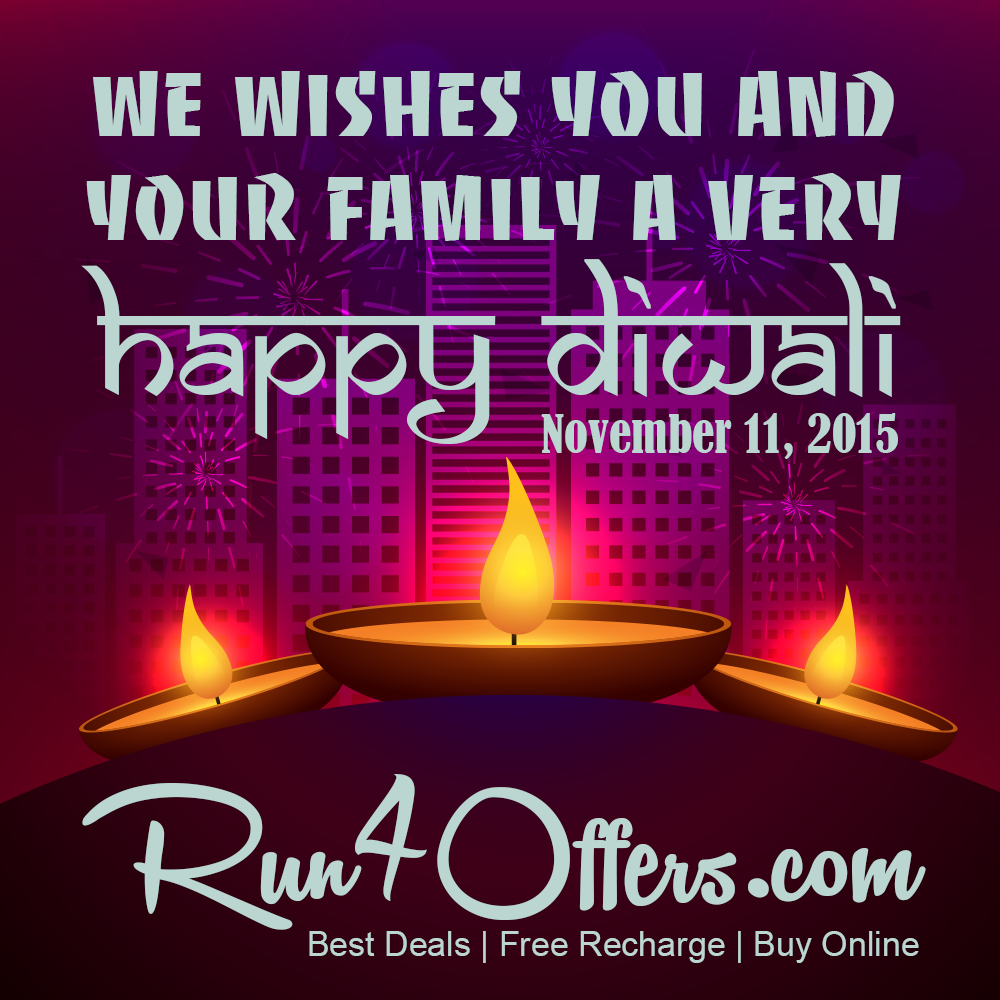
<style>
.page{position:relative;width:1000px;height:1000px}
.page>*{position:absolute;margin:0}
.t1{font:87px "BaccaratUpright";color:#bbd6d1}
.t2{font:150px "SamarkanNormal";color:#bbd6d1}
.t3{font:50px "BernardMT-Condensed";color:#bbd6d1}
.t4{font:182px "RemachineScriptPersonalUse";color:#bbd6d1}
.t5{font:182px "DeadlyInked";color:#bbd6d1}
.t6{font:34px "ArialMT";color:#bbd6d1}
</style>
<div class="page">
<p class="t1" style="left:86px;top:71px;width:815px;height:170px;text-align:center">We wishes you and your Family a very</p>
<p class="t2" style="left:81px;top:259px;width:820px;height:185px">Happy Diwali</p>
<p class="t3" style="left:541px;top:413px;width:357px;height:46px">November 11, 2015</p>
<p class="t4" style="left:82px;top:774px;width:844px;height:156px">Run<span class="t5">4</span>Offers.com</p>
<p class="t6" style="left:309px;top:931px;width:610px;height:32px">Best Deals | Free Recharge | Buy Online</p>
</div>
